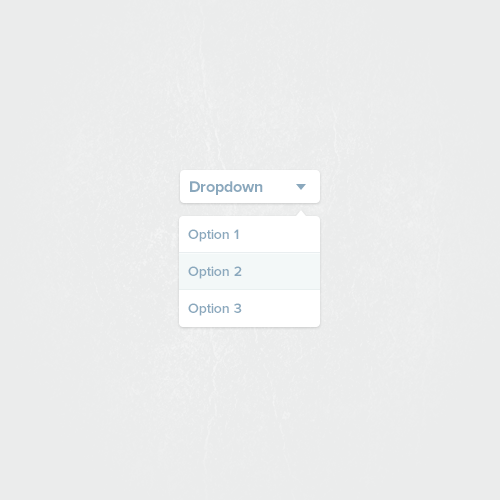
<style>
.page{position:relative;width:500px;height:500px;background:#ebecec}
.page>*{position:absolute;margin:0}
.t1{font:16px "ProximaNova-Bold";color:#8aa8bd}
.t2{font:14px "ProximaNova-Semibold";color:#8aa8bd}
</style>
<div class="page">
<p class="t1" style="left:190px;top:181px;width:73px;height:14px">Dropdown</p>
<p class="t2" style="left:188px;top:229px;width:51px;height:13px">Option 1</p>
<p class="t2" style="left:188px;top:266px;width:54px;height:13px">Option 2</p>
<p class="t2" style="left:188px;top:266px;width:54px;height:13px">Option 2</p>
<p class="t2" style="left:188px;top:303px;width:54px;height:13px">Option 3</p>
</div>
